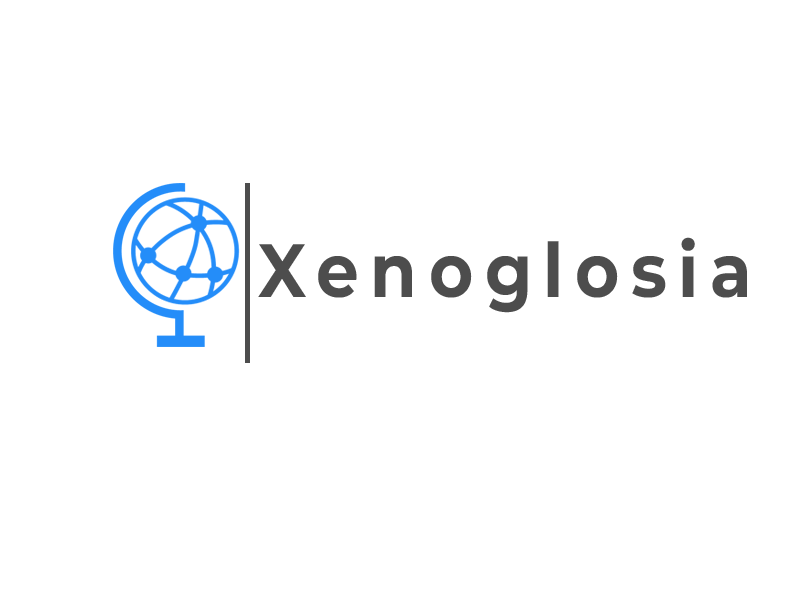
<style>
.page{position:relative;width:800px;height:600px;background:#ffffff}
.page>*{position:absolute;margin:0}
.t1{font:75.3px "Montserrat-Bold";letter-spacing:0.17em;color:#4d4d4d;scale:0.9 1}
</style>
<div class="page">
<p class="t1" style="left:258px;top:237px;width:489px;height:76px">Xenoglosia</p>
</div>
